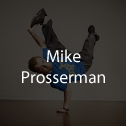
<style>
.page{position:relative;width:126px;height:126px}
.page>*{position:absolute;margin:0}
.t1{font:17.5px "MyriadPro-Regular";color:#ffffff}
</style>
<div class="page">
<p class="t1" style="left:22px;top:49px;width:83px;height:35px;text-align:center">Mike <br>Prosserman</p>
</div>
